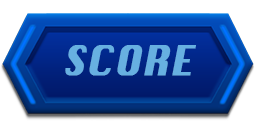
<style>
.page{position:relative;width:257px;height:128px;background:#ffffff}
.page>*{position:absolute;margin:0}
.t1{font:39.9px "Silom";color:#67b0e1;font-weight:bold;font-style:italic}
</style>
<div class="page">
<p class="t1" style="left:65px;top:45px;width:131px;height:31px">SCORE</p>
</div>
